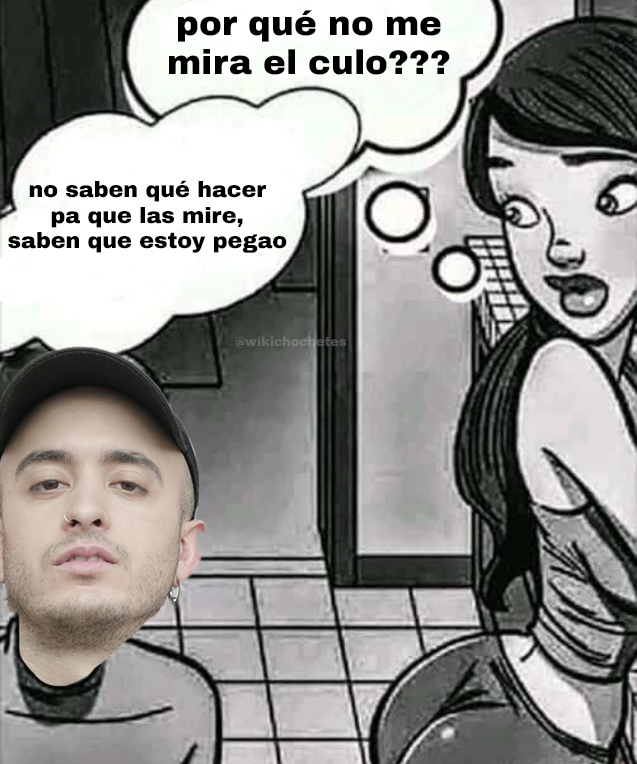
<style>
.page{position:relative;width:637px;height:764px}
.page>*{position:absolute;margin:0}
.t1{font:34.2px "ArchivoBlack-Regular";color:#000000}
.t2{font:22.1px "ArchivoBlack-Regular";color:#000000}
.t3{font:12.8px "ArchivoBlack-Regular"}
</style>
<div class="page">
<p class="t1" style="left:169px;top:10px;width:281px;height:65px;text-align:center">por qué no me<br>mira el culo???</p>
<p class="t2" style="left:8px;top:180px;width:279px;height:73px;text-align:center">no saben qué hacer<br>pa que las mire,<br>saben que estoy pegao</p>
<p class="t3" style="left:235px;top:336px;width:111px;height:12px">@wikichochetes</p>
</div>
